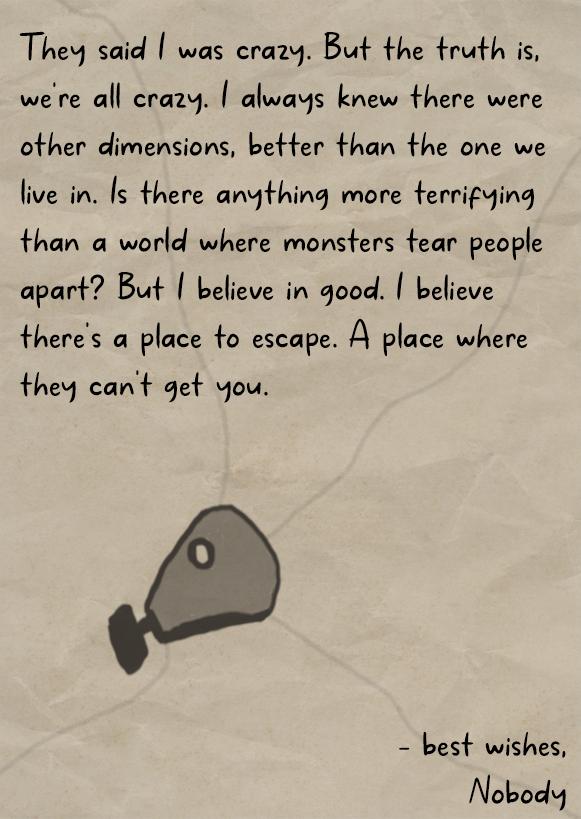
<style>
.page{position:relative;width:581px;height:819px}
.page>*{position:absolute;margin:0}
.t1{font:40px "MakanHatiCyrillicRegular";letter-spacing:0.01em;color:#000000}
.t2{font:40px/69.4px "MakanHatiCyrillicRegular";letter-spacing:0.01em;color:#000000}
</style>
<div class="page">
<p class="t1" style="left:19px;top:31px;width:527px;height:372px"><span class="t2"><br></span>They said I was crazy. But the truth is, we're all crazy. I always knew there were other dimensions, better than the one we live in. Is there anything more terrifying than a world where monsters tear people apart? But I believe in good. I believe there's a place to escape. A place where they can't get you.</p>
<p class="t1" style="left:399px;top:731px;width:167px;height:80px;text-align:justify">- best wishes, <br>Nobody</p>
</div>
